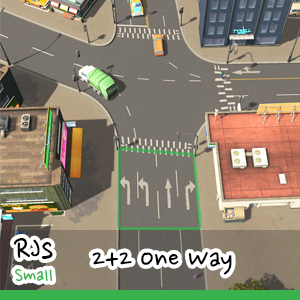
<style>
.page{position:relative;width:300px;height:300px}
.page>*{position:absolute;margin:0}
.t1{font:36.3px "NanumPen";color:#000000}
.t2{font:32px "NanumPen";color:#000000}
.t3{font:21.5px "NanumPen";color:#37b24d}
</style>
<div class="page">
<p class="t1" style="left:13px;top:238px;width:40px;height:21px">RJs</p>
<p class="t2" style="left:92px;top:252px;width:140px;height:23px">2+2 One Way</p>
<p class="t3" style="left:15px;top:269px;width:38px;height:13px">Small</p>
</div>
